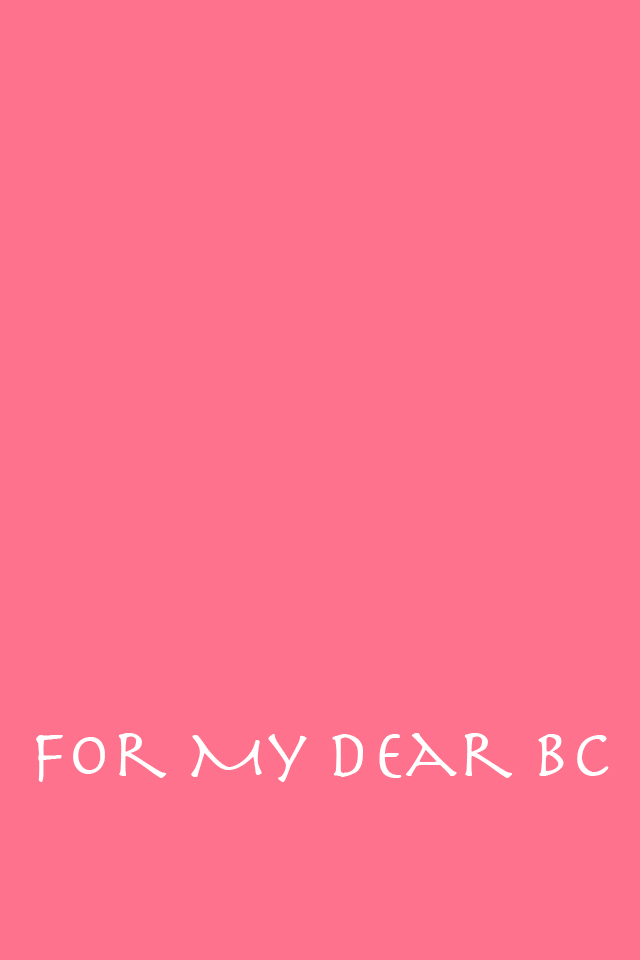
<style>
.page{position:relative;width:640px;height:960px;background:#ff728d}
.page>*{position:absolute;margin:0}
.t1{font:70px "Herculanum";color:#ffffff}
</style>
<div class="page">
<p class="t1" style="left:36px;top:733px;width:573px;height:49px">For My Dear BC</p>
</div>
